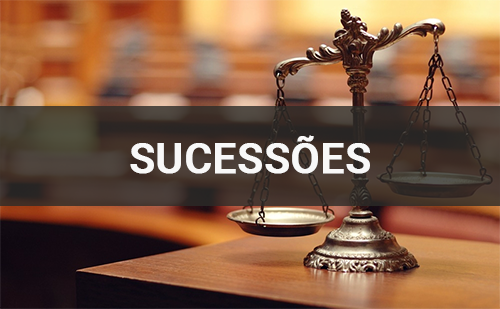
<style>
.page{position:relative;width:500px;height:309px}
.page>*{position:absolute;margin:0}
.t1{font:42px "Roboto-Medium";color:#f8f8f8;font-weight:bold}
</style>
<div class="page">
<p class="t1" style="left:130px;top:135px;width:240px;height:39px">SUCESSÕES</p>
</div>
